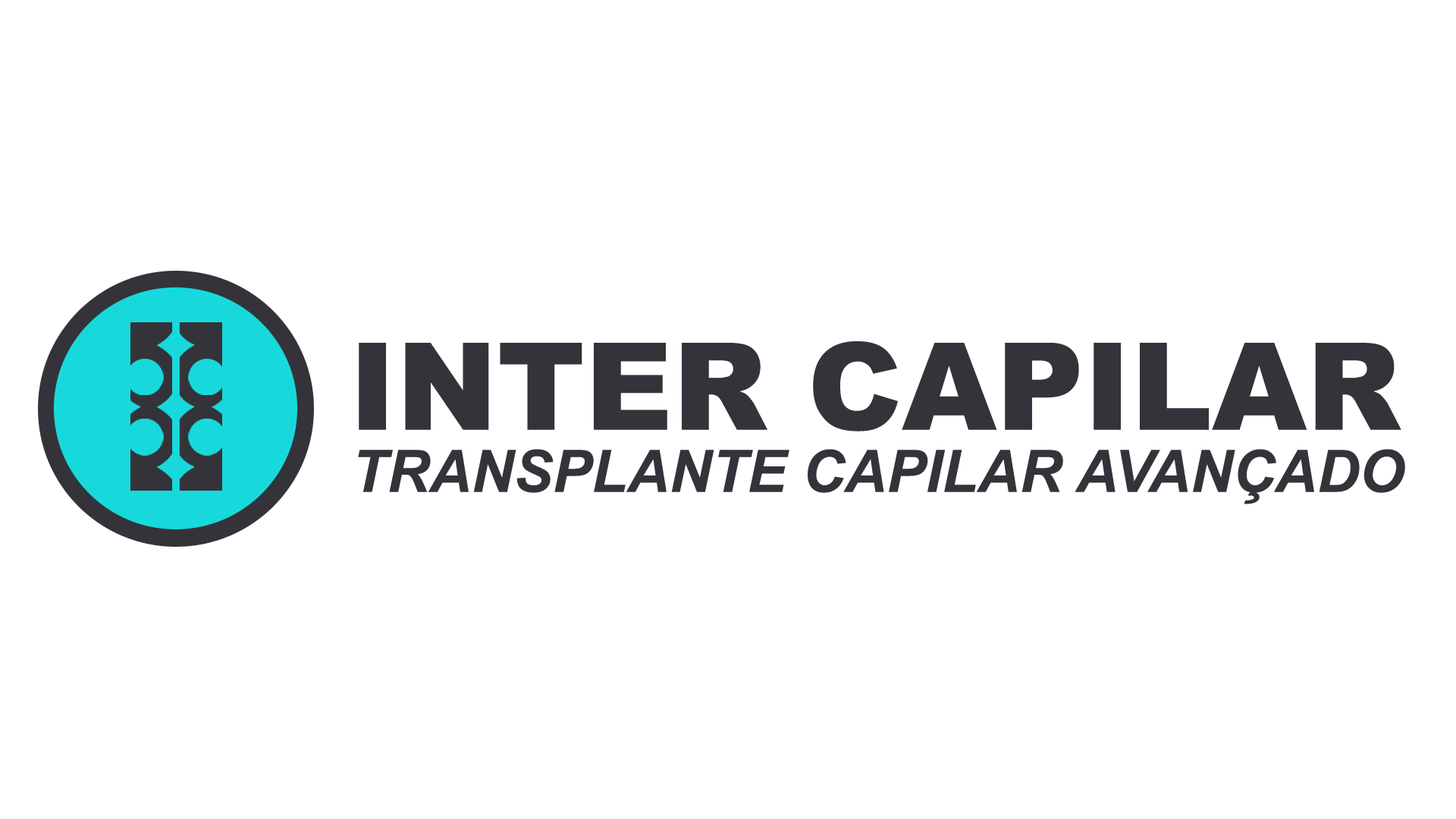
<style>
.page{position:relative;width:1456px;height:819px;background:#ffffff}
.page>*{position:absolute;margin:0}
.t1{font:121.3px "Arial-Black";color:#34333a}
.t2{font:58.4px "Arial-BoldItalicMT";color:#34333a}
</style>
<div class="page">
<p class="t1" style="left:359px;top:341px;width:1042px;height:90px">INTER CAPILAR</p>
<p class="t2" style="left:358px;top:449px;width:1047px;height:55px">TRANSPLANTE CAPILAR AVANÇADO</p>
</div>
